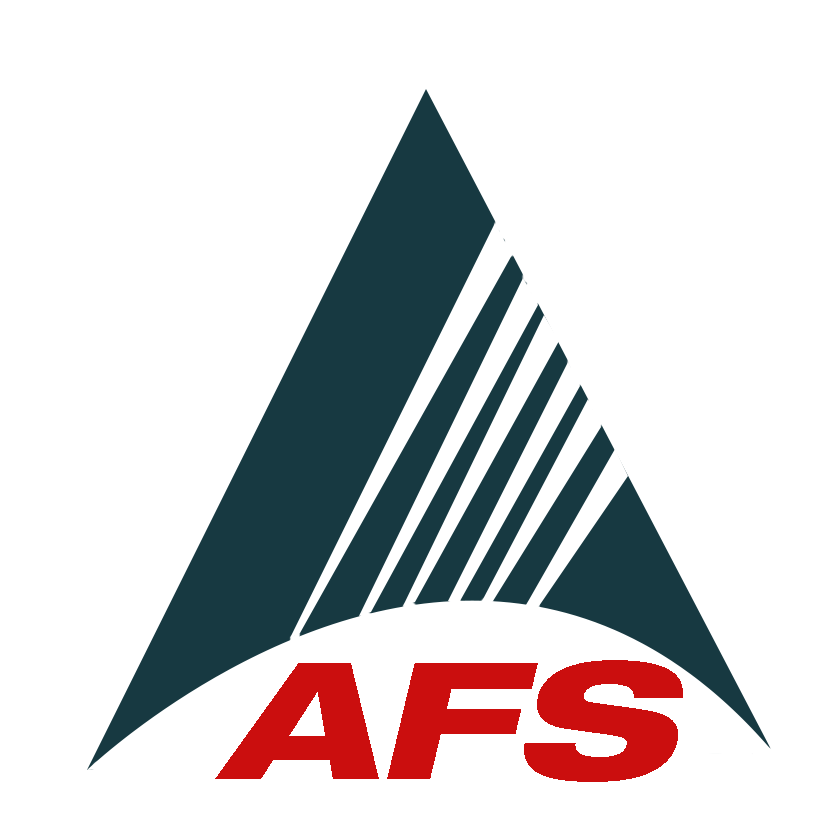
<style>
.page{position:relative;width:840px;height:840px;background:#ffffff}
.page>*{position:absolute;margin:0}
.t1{font:162.9px "HelveticaNeueLTStd-HvExO";color:#cb0e0e;scale:1.11 1}
</style>
<div class="page">
<p class="t1" style="left:215px;top:660px;width:468px;height:122px">AFS</p>
</div>
